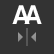
<style>
.page{position:relative;width:54px;height:54px;background:#333333}
.page>*{position:absolute;margin:0}
.t1{font:26px "Helvetica-Bold";color:#ffffff}
</style>
<div class="page">
<p class="t1" style="left:12px;top:5px;width:30px;height:19px">AA</p>
</div>
